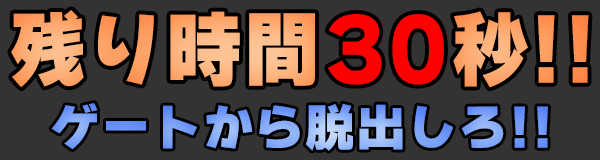
<style>
.page{position:relative;width:600px;height:160px;background:#333333}
.page>*{position:absolute;margin:0}
.t1{font:82px "WanpakuRuika-08";letter-spacing:0.029em;scale:0.93 1}
.t2{font:85px "WanpakuRuika-08";letter-spacing:0.029em;color:#ff0000;scale:0.93 1}
.t3{font:50px "WanpakuRuika-08";letter-spacing:0.029em}
</style>
<div class="page">
<p class="t1" style="left:11px;top:10px;width:578px;height:78px">残り時間     秒!!</p>
<p class="t2" style="left:328px;top:14px;width:116px;height:71px">30</p>
<p class="t3" style="left:51px;top:103px;width:497px;height:48px">ゲートから脱出しろ!!</p>
</div>
